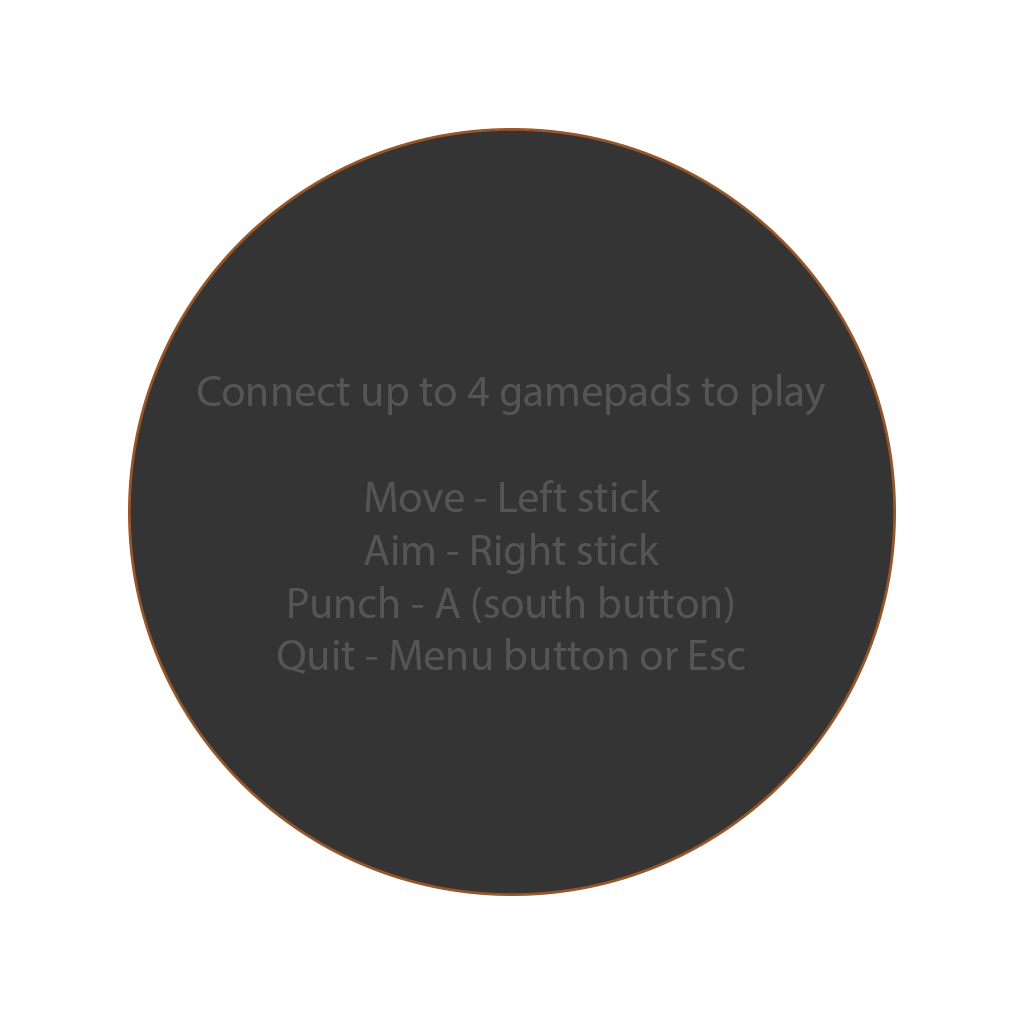
<style>
.page{position:relative;width:1024px;height:1024px;background:#ffffff}
.page>*{position:absolute;margin:0}
.t1{font:44px "MyriadPro-Regular";color:#555555}
</style>
<div class="page">
<p class="t1" style="left:198px;top:374px;width:627px;height:300px;text-align:center">Connect up to 4 gamepads to play<br><br>Move - Left stick<br>Aim - Right stick<br>Punch - A (south button)<br>Quit - Menu button or Esc</p>
</div>
